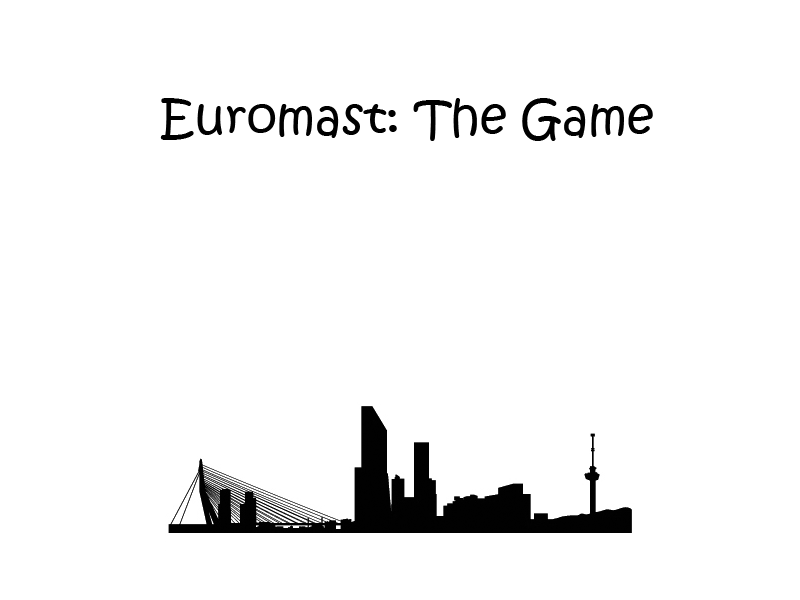
<style>
.page{position:relative;width:800px;height:600px;background:#ffffff}
.page>*{position:absolute;margin:0}
.t1{font:48px "KristenITC-Regular";color:#000000}
</style>
<div class="page">
<p class="t1" style="left:160px;top:98px;width:493px;height:43px">Euromast: The Game</p>
</div>
